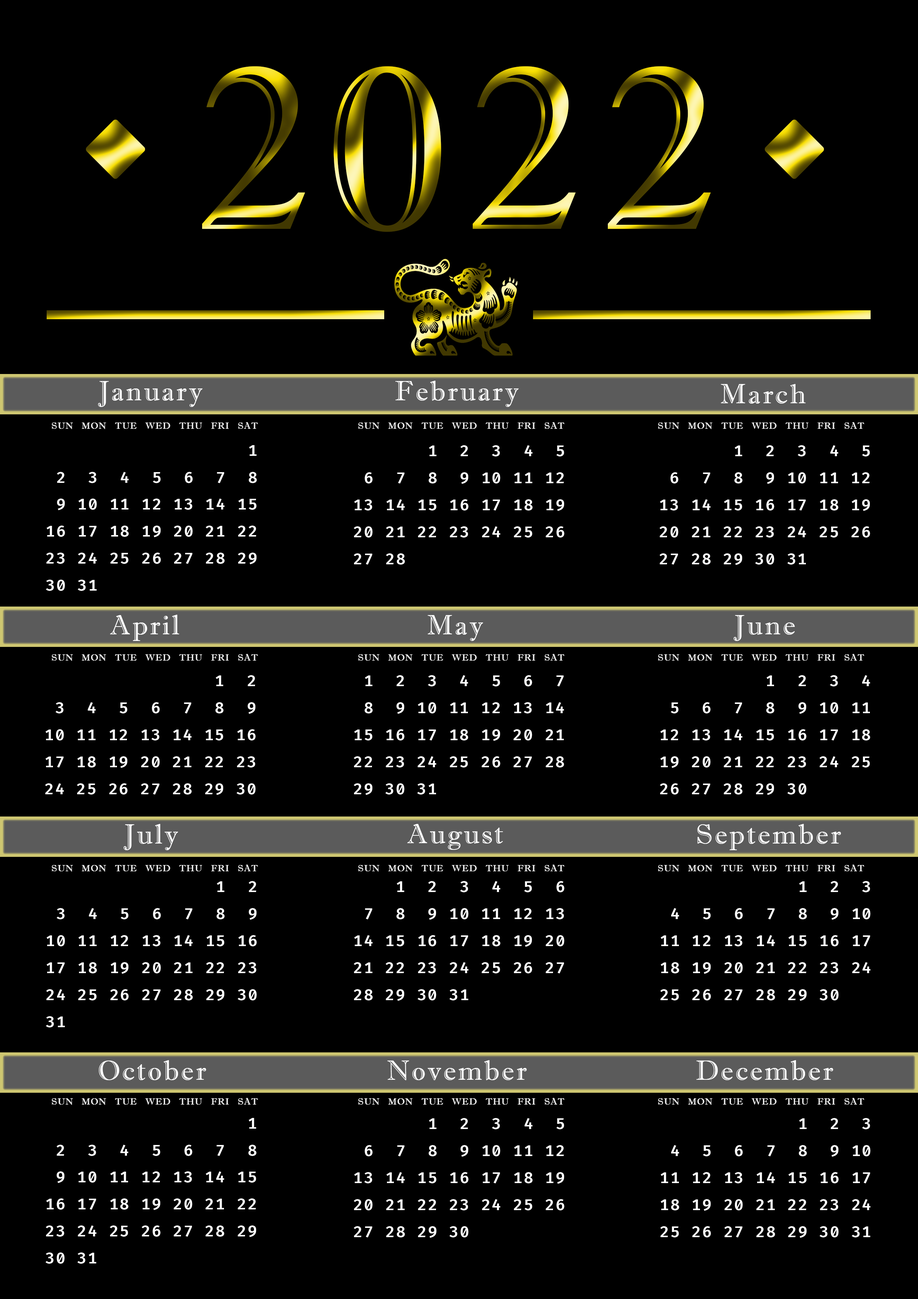
<style>
.page{position:relative;width:918px;height:1299px;background:#000000}
.page>*{position:absolute;margin:0}
.t1{font:231.4px "ImprintMT-Shadow";letter-spacing:0.075em}
.t2{font:27.8px "ImprintMT-Shadow";letter-spacing:0.075em;color:#ffffff}
.t3{font:9.3px "ImprintMT-Shadow";letter-spacing:0.05em;color:#ffffff}
.t4{font:15.4px "FiraCode-SemiBold";letter-spacing:0.075em;color:#ffffff}
</style>
<div class="page">
<p class="t1" style="left:202px;top:66px;width:509px;height:166px">2022</p>
<p class="t2" style="left:98px;top:381px;width:105px;height:26px">January</p>
<p class="t2" style="left:395px;top:381px;width:124px;height:26px">February</p>
<p class="t2" style="left:721px;top:384px;width:85px;height:20px">March</p>
<p class="t3" style="left:52px;top:422px;width:206px;height:7px">SUN   MON   TUE   WED   THU   FRI   SAT</p>
<p class="t3" style="left:358px;top:422px;width:207px;height:7px">SUN   MON   TUE   WED   THU   FRI   SAT</p>
<p class="t3" style="left:658px;top:422px;width:206px;height:7px">SUN   MON   TUE   WED   THU   FRI   SAT</p>
<p class="t4" style="left:46px;top:445px;width:211px;height:146px;text-align:right">1<br>2  3  4  5  6  7  8<br>9 10 11 12 13 14 15<br>16 17 18 19 20 21 22<br>23 24 25 26 27 28 29<br>30 31</p>
<p class="t4" style="left:354px;top:445px;width:211px;height:120px;text-align:right">1  2  3  4  5<br>6  7  8  9 10 11 12<br>13 14 15 16 17 18 19<br>20 21 22 23 24 25 26<br>27 28</p>
<p class="t4" style="left:660px;top:445px;width:210px;height:120px;text-align:right">1  2  3  4  5<br>6  7  8  9 10 11 12<br>13 14 15 16 17 18 19<br>20 21 22 23 24 25 26<br>27 28 29 30 31</p>
<p class="t2" style="left:110px;top:615px;width:69px;height:26px">April</p>
<p class="t2" style="left:428px;top:615px;width:55px;height:26px">May</p>
<p class="t2" style="left:733px;top:615px;width:62px;height:26px">June</p>
<p class="t3" style="left:52px;top:654px;width:206px;height:7px">SUN   MON   TUE   WED   THU   FRI   SAT</p>
<p class="t3" style="left:358px;top:654px;width:207px;height:7px">SUN   MON   TUE   WED   THU   FRI   SAT</p>
<p class="t3" style="left:658px;top:654px;width:206px;height:7px">SUN   MON   TUE   WED   THU   FRI   SAT</p>
<p class="t4" style="left:45px;top:675px;width:211px;height:120px;text-align:right">1  2<br>3  4  5  6  7  8  9<br>10 11 12 13 14 15 16<br>17 18 19 20 21 22 23<br>24 25 26 27 28 29 30</p>
<p class="t4" style="left:354px;top:675px;width:210px;height:120px;text-align:right">1  2  3  4  5  6  7<br>8  9 10 11 12 13 14<br>15 16 17 18 19 20 21<br>22 23 24 25 26 27 28<br>29 30 31</p>
<p class="t4" style="left:660px;top:675px;width:210px;height:120px;text-align:right">1  2  3  4<br>5  6  7  8  9 10 11<br>12 13 14 15 16 17 18<br>19 20 21 22 23 24 25<br>26 27 28 29 30</p>
<p class="t2" style="left:123px;top:824px;width:55px;height:26px">July</p>
<p class="t2" style="left:407px;top:824px;width:96px;height:26px">August</p>
<p class="t2" style="left:697px;top:824px;width:144px;height:26px">September</p>
<p class="t3" style="left:52px;top:864px;width:206px;height:8px">SUN   MON   TUE   WED   THU   FRI   SAT</p>
<p class="t3" style="left:358px;top:864px;width:207px;height:8px">SUN   MON   TUE   WED   THU   FRI   SAT</p>
<p class="t3" style="left:658px;top:864px;width:206px;height:8px">SUN   MON   TUE   WED   THU   FRI   SAT</p>
<p class="t4" style="left:46px;top:881px;width:211px;height:146px;text-align:right">1  2<br>3  4  5  6  7  8  9<br>10 11 12 13 14 15 16<br>17 18 19 20 21 22 23<br>24 25 26 27 28 29 30<br>31</p>
<p class="t4" style="left:354px;top:881px;width:211px;height:120px;text-align:right">1  2  3  4  5  6<br>7  8  9 10 11 12 13<br>14 15 16 17 18 19 20<br>21 22 23 24 25 26 27<br>28 29 30 31</p>
<p class="t4" style="left:660px;top:881px;width:211px;height:120px;text-align:right">1  2  3<br>4  5  6  7  8  9 10<br>11 12 13 14 15 16 17<br>18 19 20 21 22 23 24<br>25 26 27 28 29 30</p>
<p class="t2" style="left:99px;top:1060px;width:107px;height:20px">October</p>
<p class="t2" style="left:387px;top:1060px;width:140px;height:20px">November</p>
<p class="t2" style="left:696px;top:1060px;width:137px;height:20px">December</p>
<p class="t3" style="left:52px;top:1098px;width:206px;height:7px">SUN   MON   TUE   WED   THU   FRI   SAT</p>
<p class="t3" style="left:358px;top:1098px;width:207px;height:7px">SUN   MON   TUE   WED   THU   FRI   SAT</p>
<p class="t3" style="left:658px;top:1098px;width:206px;height:7px">SUN   MON   TUE   WED   THU   FRI   SAT</p>
<p class="t4" style="left:46px;top:1118px;width:211px;height:146px;text-align:right">1<br>2  3  4  5  6  7  8<br>9 10 11 12 13 14 15<br>16 17 18 19 20 21 22<br>23 24 25 26 27 28 29<br>30 31</p>
<p class="t4" style="left:354px;top:1118px;width:211px;height:120px;text-align:right">1  2  3  4  5<br>6  7  8  9 10 11 12<br>13 14 15 16 17 18 19<br>20 21 22 23 24 25 26<br>27 28 29 30</p>
<p class="t4" style="left:660px;top:1118px;width:211px;height:120px;text-align:right">1  2  3<br>4  5  6  7  8  9 10<br>11 12 13 14 15 16 17<br>18 19 20 21 22 23 24<br>25 26 27 28 29 30 31</p>
</div>
